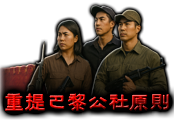
<style>
.page{position:relative;width:174px;height:140px;background:#ffffff}
.page>*{position:absolute;margin:0}
.t1{font:20.9px "FZZJ-MSHLFW"}
</style>
<div class="page">
<p class="t1" style="left:5px;top:93px;width:164px;height:18px">重提巴黎公社原则</p>
</div>
